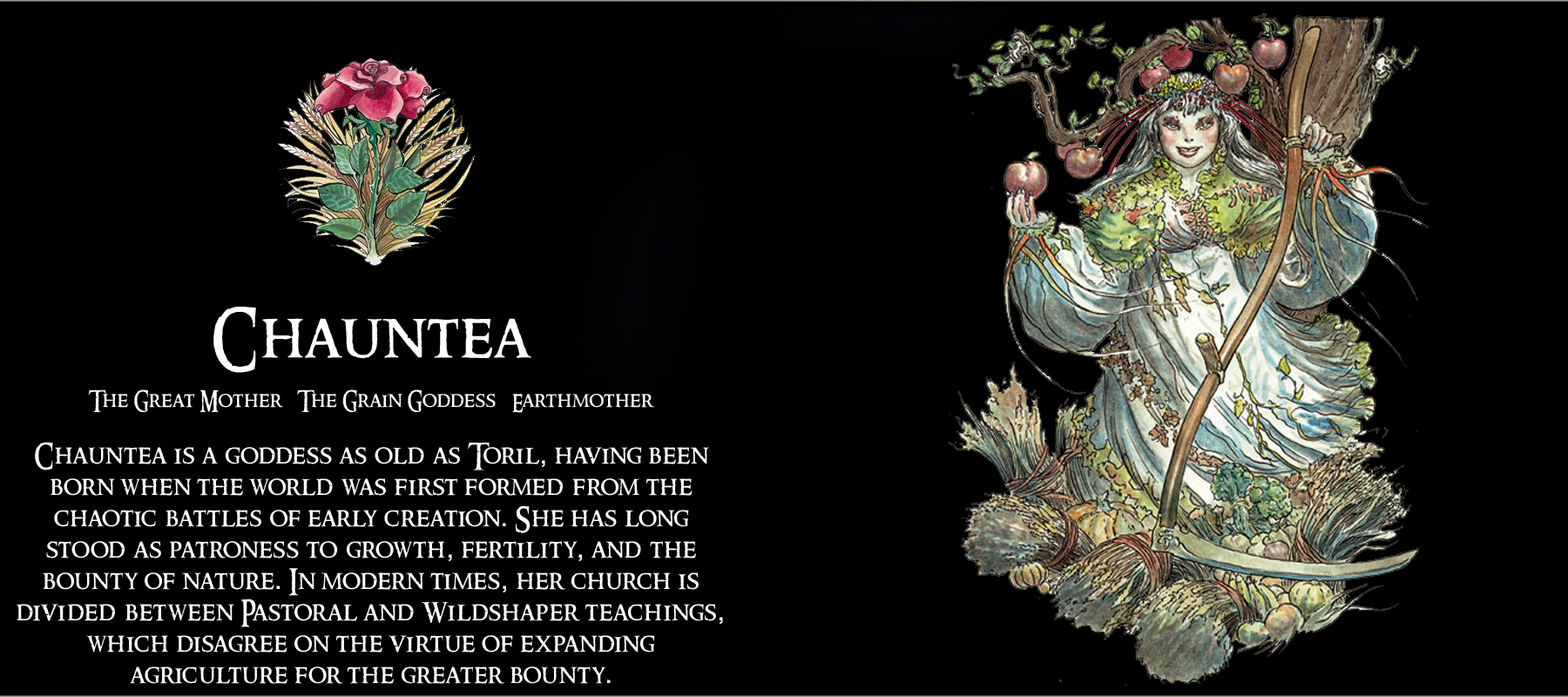
<style>
.page{position:relative;width:1568px;height:697px;background:#000000}
.page>*{position:absolute;margin:0}
.t1{font:26.1px "RingbearerMedium";letter-spacing:0.025em;color:#ffffff}
.t2{font:62.7px "RingbearerMedium";letter-spacing:0.025em;color:#ffffff}
.t3{font:20.9px "RingbearerMedium";letter-spacing:0.025em;color:#ffffff}
.t4{font:26.1px "Rockwell";letter-spacing:0.025em;color:#ffffff}
</style>
<div class="page">
<p class="t1" style="left:17px;top:307px;width:706px;height:377px;text-align:center"><span class="t2">Chauntea<br></span><span class="t3"><br>The Great Mother   The Grain Goddess   Earthmother<br><br></span>Chauntea is a goddess as old as Toril<span class="t4">,</span> having been<br>born when the world was first formed from the<br>chaotic battles of early creation<span class="t4">.</span> She has long<br>stood as patroness to growth<span class="t4">,</span> fertility<span class="t4">,</span> and the<br>bounty of nature<span class="t4">.</span> In modern times<span class="t4">,</span> her church is <br>divided between Pastoral and Wildshaper teachings<span class="t4">,</span> which disagree on the virtue of expanding <br>agriculture for the greater bounty<span class="t4">.</span></p>
</div>
